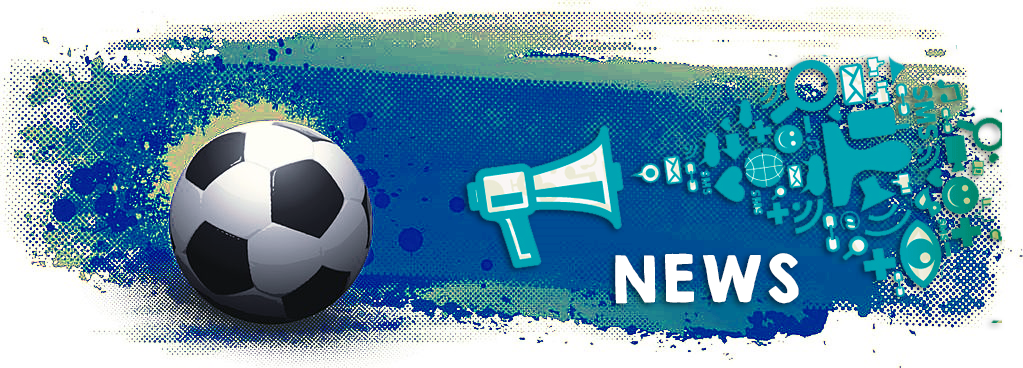
<style>
.page{position:relative;width:1023px;height:368px}
.page>*{position:absolute;margin:0}
.t1{font:58.3px "KGHAPPYSolid";color:#ffffff}
</style>
<div class="page">
<p class="t1" style="left:615px;top:253px;width:184px;height:51px">NEWS</p>
</div>
